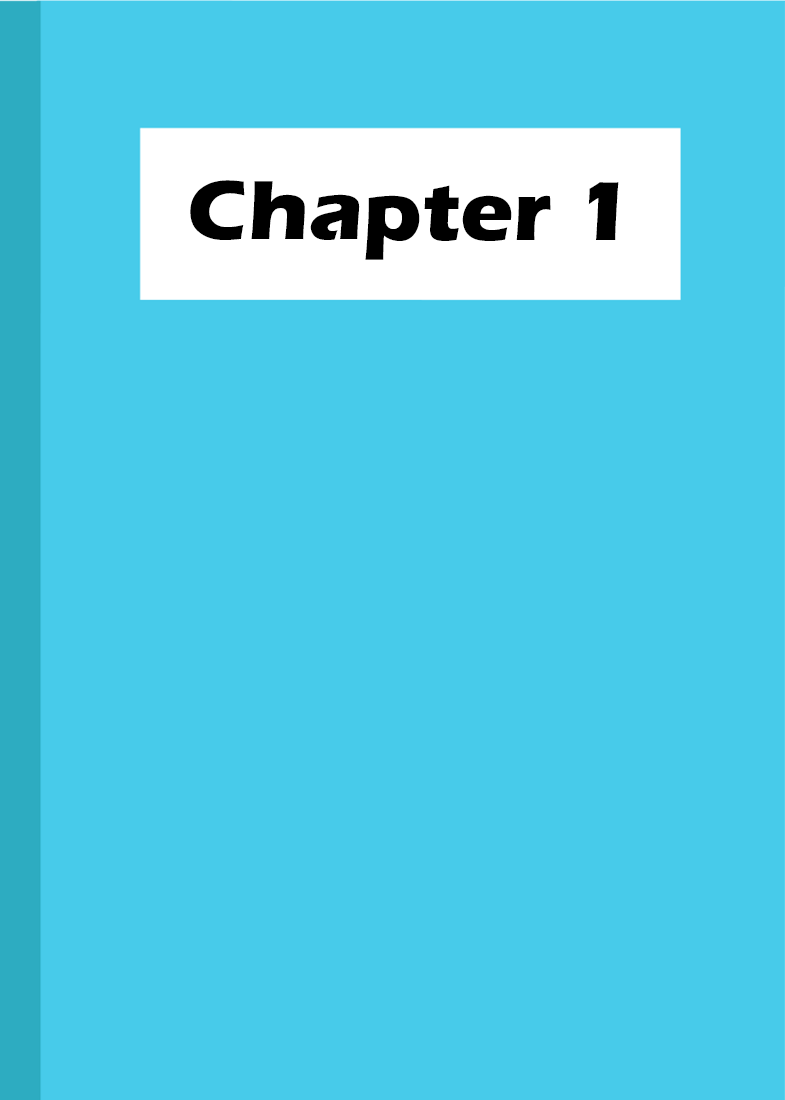
<style>
.page{position:relative;width:785px;height:1100px;background:#47cbea}
.page>*{position:absolute;margin:0}
.t1{font:86.4px "ErasITC-Bold";color:#000000;scale:1.04 1}
</style>
<div class="page">
<p class="t1" style="left:190px;top:180px;width:429px;height:80px">Chapter 1</p>
</div>
